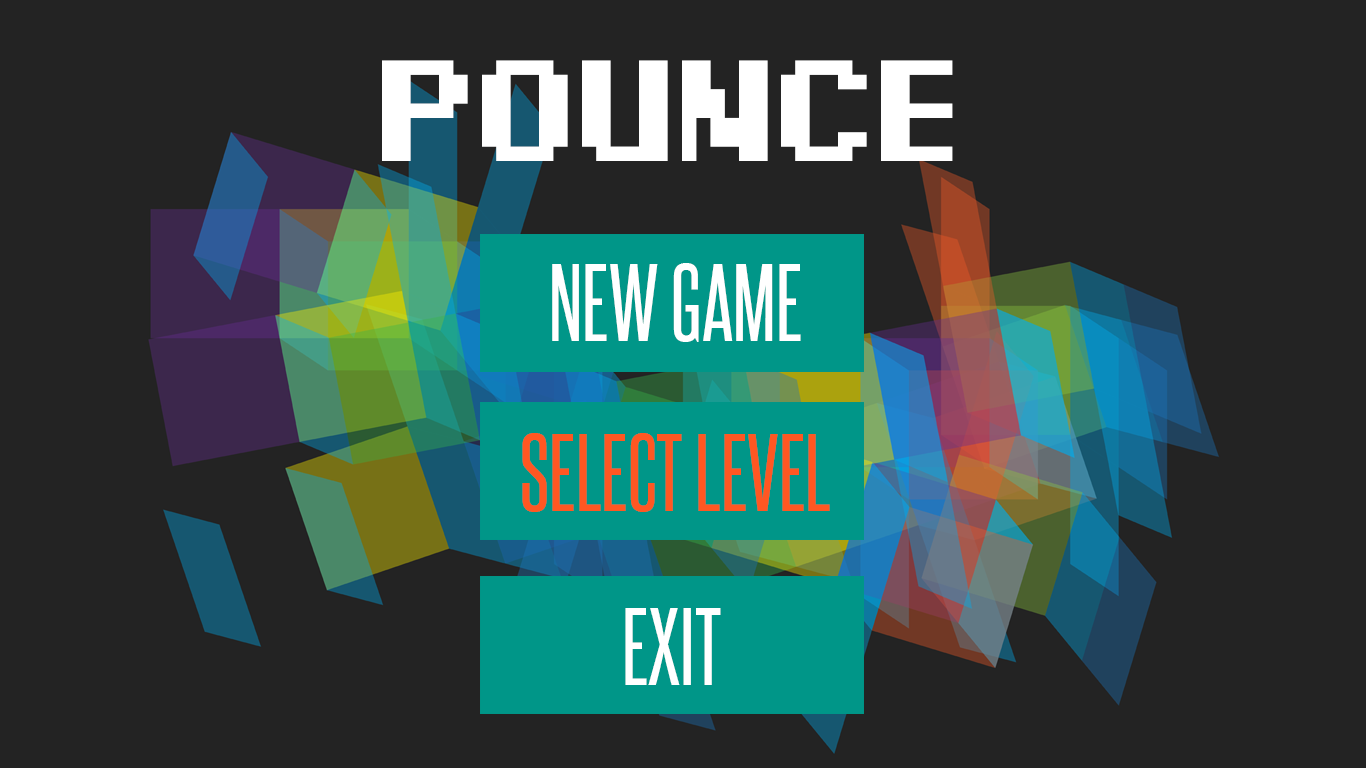
<style>
.page{position:relative;width:1366px;height:768px;background:#232323}
.page>*{position:absolute;margin:0}
.t1{font:146.9px "PixelDigivolve";color:#ffffff}
.t2{font:94.3px "SteelfishRg-Regular";color:#ffffff}
.t3{font:94.3px "SteelfishRg-Regular";color:#ff5722}
</style>
<div class="page">
<p class="t1" style="left:382px;top:60px;width:571px;height:101px">Pounce</p>
<p class="t2" style="left:552px;top:263px;width:249px;height:79px">NEW GAME</p>
<p class="t3" style="left:522px;top:433px;width:308px;height:79px">SELECT LEVEL</p>
<p class="t2" style="left:625px;top:608px;width:96px;height:77px">EXIT</p>
</div>
